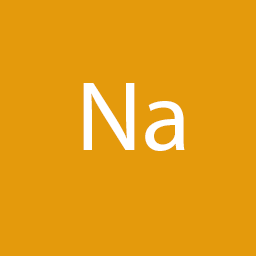
<style>
.page{position:relative;width:256px;height:256px;background:#e49a0c}
.page>*{position:absolute;margin:0}
.t1{font:100px "MyriadPro-Regular";color:#ffffff}
</style>
<div class="page">
<p class="t1" style="left:83px;top:83px;width:102px;height:68px">Na</p>
</div>
